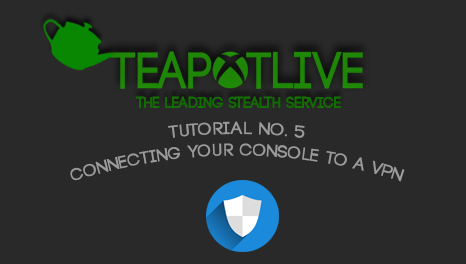
<style>
.page{position:relative;width:466px;height:264px;background:#292929}
.page>*{position:absolute;margin:0}
.t1{font:18px "Code-Bold";color:#9c9a9a}
</style>
<div class="page">
<p class="t1" style="left:70px;top:121px;width:335px;height:61px;text-align:center">Tutorial No. 5<br>Connecting your console to a vpn</p>
</div>
